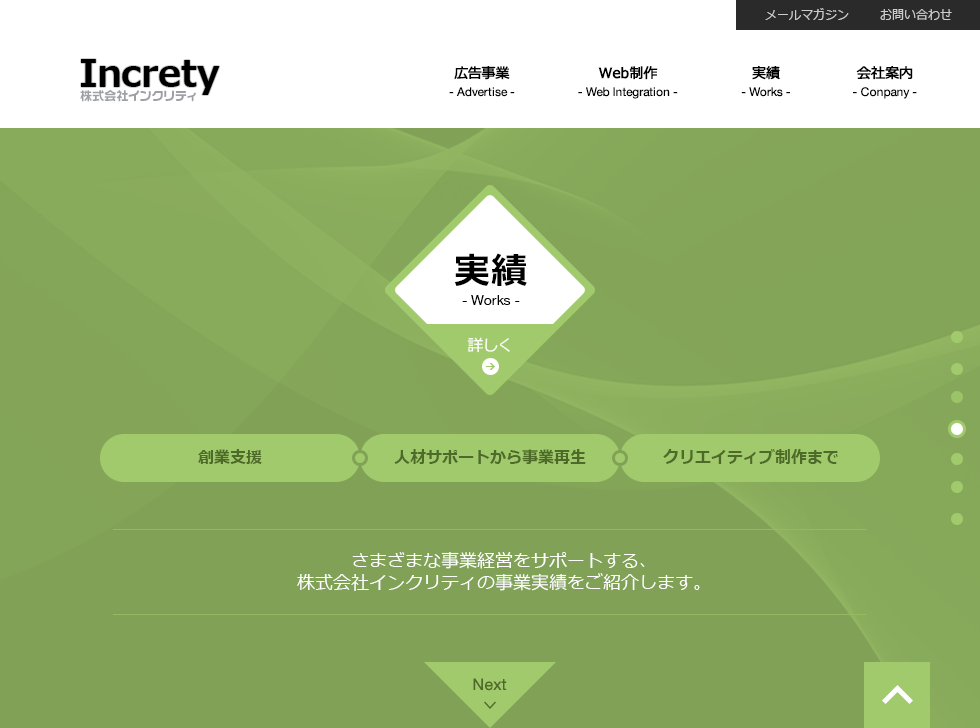
<style>
.page{position:relative;width:980px;height:728px;background:#81a256}
.page>*{position:absolute;margin:0}
.t1{font:12px "Meiryo";color:#cccccc}
.t2{font:36.6px "Meiryo-Bold";color:#000000}
.t3{font:14px "Meiryo";color:#000000;font-weight:bold}
.t4{font:12px "HelveticaNeue";color:#000000}
.t5{font:12px "VD-LogoMaru-Extra-G";color:#9da1a6}
.t6{font:36px "Meiryo-Bold";color:#000000}
.t7{font:14px "HelveticaNeue";color:#000000}
.t8{font:16px "Meiryo";color:#ffffff}
.t9{font:16px "Meiryo-Bold";color:#4e6a29}
.t10{font:18px/22px "Meiryo";color:#ffffff}
.t11{font:16px "HelveticaNeue";color:#4e6a29}
</style>
<div class="page">
<p class="t1" style="left:765px;top:8px;width:84px;height:12px">メールマガジン</p>
<p class="t1" style="left:880px;top:9px;width:72px;height:11px">お問い合わせ</p>
<p class="t2" style="left:81px;top:59px;width:139px;height:36px">Increty</p>
<p class="t3" style="left:454px;top:66px;width:56px;height:14px">広告事業</p>
<p class="t3" style="left:598px;top:66px;width:60px;height:14px">Web制作</p>
<p class="t3" style="left:752px;top:66px;width:28px;height:14px">実績</p>
<p class="t3" style="left:856px;top:66px;width:57px;height:14px">会社案内</p>
<p class="t4" style="left:449px;top:87px;width:66px;height:10px">- Advertise -</p>
<p class="t4" style="left:578px;top:87px;width:100px;height:12px">- Web Integration -</p>
<p class="t4" style="left:741px;top:87px;width:49px;height:10px">- Works -</p>
<p class="t4" style="left:853px;top:87px;width:64px;height:12px">- Conpany -</p>
<p class="t5" style="left:80px;top:90px;width:116px;height:12px">株式会社インクリティ</p>
<p class="t6" style="left:454px;top:253px;width:73px;height:33px">実績</p>
<p class="t7" style="left:462px;top:295px;width:58px;height:10px">- Works -</p>
<p class="t8" style="left:467px;top:337px;width:43px;height:16px">詳しく</p>
<p class="t9" style="left:198px;top:449px;width:64px;height:15px">創業支援</p>
<p class="t9" style="left:394px;top:449px;width:192px;height:15px">人材サポートから事業再生</p>
<p class="t9" style="left:663px;top:449px;width:175px;height:15px">クリエイティブ制作まで</p>
<p class="t10" style="left:297px;top:552px;width:403px;height:39px;text-align:center">さまざまな事業経営をサポートする、<br>株式会社インクリティの事業実績をご紹介します。</p>
<p class="t11" style="left:473px;top:678px;width:34px;height:13px">Next</p>
</div>
